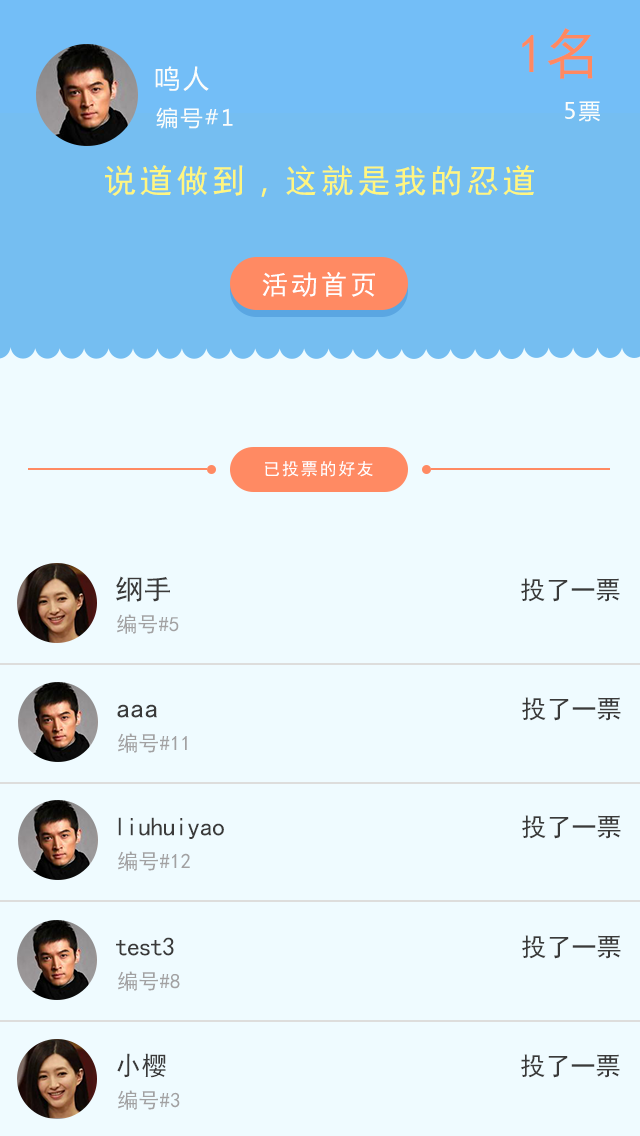
<style>
.page{position:relative;width:640px;height:1136px;background:#effbff}
.page>*{position:absolute;margin:0}
.t1{font:55px "SimHei";letter-spacing:0.005em;color:#ff8a61}
.t2{font:26px "MicrosoftYaHei";letter-spacing:0.1em;color:#fafdfb}
.t3{font:22px "MicrosoftYaHei";letter-spacing:0.1em;color:#fafdfb}
.t4{font:33px "SimHei";letter-spacing:0.1em;color:#fff67f}
.t5{font:33px "MicrosoftYaHei";letter-spacing:0.1em;color:#fff67f}
.t6{font:27px "SimHei";letter-spacing:0.1em;color:#ffffff}
.t7{font:17px "SimHei";letter-spacing:0.1em;color:#ffffff}
.t8{font:28px "SimHei";letter-spacing:0.005em;color:#3a393a}
.t9{font:25px "SimHei";letter-spacing:0.005em;color:#3a393a}
.t10{font:21px "SimHei";letter-spacing:0.005em;color:#a2a1a2}
.t11{font:26px "SimHei";letter-spacing:-0.025em;color:#3a393a}
.t12{font:26px "SimHei";letter-spacing:-0.05em;color:#3a393a}
.t13{font:26px "SimHei";letter-spacing:0.005em;color:#3a393a}
</style>
<div class="page">
<p class="t1" style="left:522px;top:28px;width:71px;height:51px">1名</p>
<p class="t2" style="left:155px;top:66px;width:54px;height:25px">鸣人</p>
<p class="t3" style="left:565px;top:101px;width:35px;height:21px">5票</p>
<p class="t3" style="left:156px;top:107px;width:77px;height:22px">编号#1</p>
<p class="t4" style="left:105px;top:165px;width:429px;height:32px">说道做到<span class="t5">，</span>这就是我的忍道</p>
<p class="t6" style="left:262px;top:271px;width:113px;height:26px">活动首页</p>
<p class="t7" style="left:265px;top:461px;width:108px;height:16px">已投票的好友</p>
<p class="t8" style="left:116px;top:576px;width:54px;height:26px">纲手</p>
<p class="t9" style="left:521px;top:578px;width:99px;height:24px">投了一票</p>
<p class="t10" style="left:117px;top:614px;width:62px;height:20px">编号#5</p>
<p class="t9" style="left:522px;top:697px;width:99px;height:24px">投了一票</p>
<p class="t8" style="left:117px;top:704px;width:40px;height:14px">aaa</p>
<p class="t10" style="left:118px;top:733px;width:69px;height:20px">编号#11</p>
<p class="t11" style="left:118px;top:817px;width:106px;height:22px">liuhuiyao</p>
<p class="t9" style="left:522px;top:815px;width:99px;height:24px">投了一票</p>
<p class="t10" style="left:118px;top:851px;width:72px;height:20px">编号#12</p>
<p class="t12" style="left:116px;top:937px;width:58px;height:19px">test3</p>
<p class="t9" style="left:522px;top:935px;width:99px;height:24px">投了一票</p>
<p class="t10" style="left:118px;top:971px;width:62px;height:20px">编号#8</p>
<p class="t13" style="left:117px;top:1053px;width:49px;height:25px">小樱</p>
<p class="t9" style="left:521px;top:1054px;width:99px;height:24px">投了一票</p>
<p class="t10" style="left:118px;top:1090px;width:62px;height:20px">编号#3</p>
</div>
